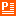
<style>
.page{position:relative;width:16px;height:16px;background:#ff5700}
.page>*{position:absolute;margin:0}
.t1{font:11px "Arial-BoldMT";color:#ffffff}
</style>
<div class="page">
<p class="t1" style="left:2px;top:2px;width:6px;height:8px">P</p>
</div>
